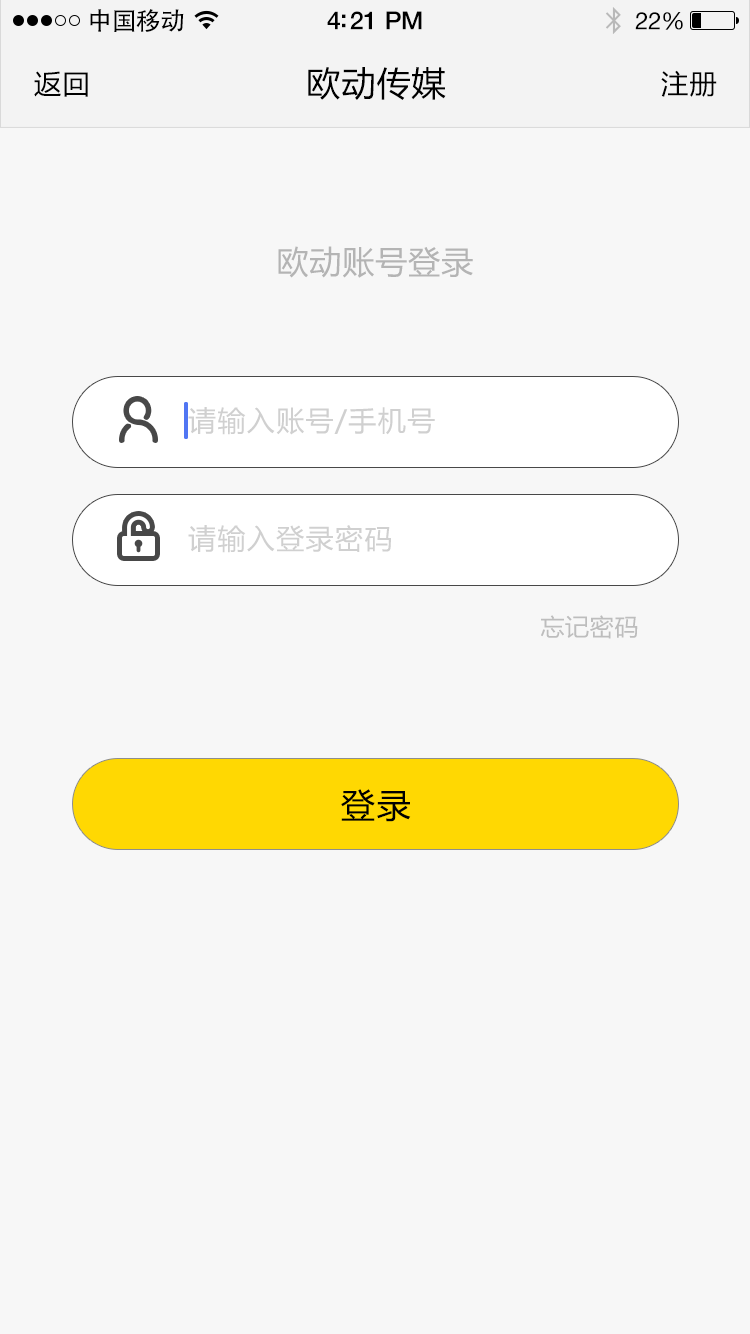
<style>
.page{position:relative;width:750px;height:1334px;background:#f7f7f7}
.page>*{position:absolute;margin:0}
.t1{font:25px "AdobeHeitiStd-Regular";letter-spacing:-0.025em;color:#000000}
.t2{font:25px "HelveticaNeue-Medium";letter-spacing:-0.02em;color:#000000}
.t3{font:24px "HelveticaNeue";letter-spacing:-0.02em;color:#000000}
.t4{font:27px "MicrosoftYaHei";letter-spacing:0.05em;color:#000000}
.t5{font:34px "MicrosoftYaHei";letter-spacing:0.03em;color:#000000}
.t6{font:32px "MicrosoftYaHei";letter-spacing:0.03em;color:#b4b4b4}
.t7{font:28px "MicrosoftYaHei";letter-spacing:0.05em;color:#d0d0d0}
.t8{font:24px "MicrosoftYaHei";letter-spacing:0.03em;color:#bdbdbd}
.t9{font:34px "MicrosoftYaHei";letter-spacing:0.05em;color:#000000}
</style>
<div class="page">
<p class="t1" style="left:90px;top:9px;width:94px;height:23px">中国移动</p>
<p class="t2" style="left:327px;top:11px;width:95px;height:19px">4:21 PM</p>
<p class="t3" style="left:635px;top:12px;width:48px;height:18px">22%</p>
<p class="t4" style="left:34px;top:71px;width:54px;height:26px">返回</p>
<p class="t5" style="left:308px;top:67px;width:138px;height:33px">欧动传媒</p>
<p class="t4" style="left:661px;top:70px;width:56px;height:27px">注册</p>
<p class="t6" style="left:278px;top:246px;width:195px;height:32px">欧动账号登录</p>
<p class="t7" style="left:188px;top:407px;width:247px;height:28px">请输入账号/手机号</p>
<p class="t7" style="left:188px;top:525px;width:203px;height:28px">请输入登录密码</p>
<p class="t8" style="left:541px;top:615px;width:97px;height:24px">忘记密码</p>
<p class="t9" style="left:341px;top:789px;width:70px;height:33px">登录</p>
</div>
